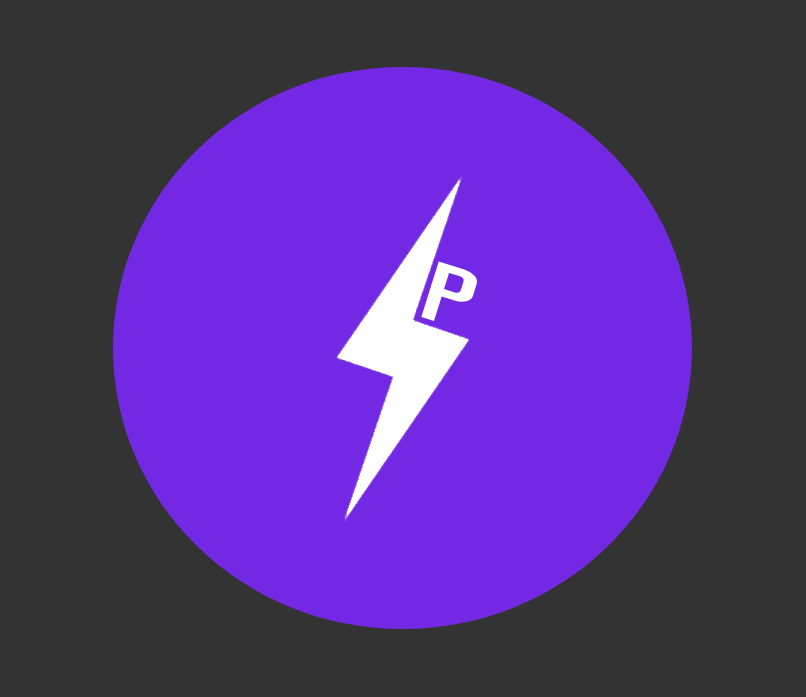
<style>
.page{position:relative;width:806px;height:697px;background:#333333}
.page>*{position:absolute;margin:0}
.t1{font:120.6px "Dhurjati";color:#ffffff}
</style>
<div class="page">
<p class="t1" style="left:421px;top:261px;width:56px;height:60px;rotate:17deg">P</p>
</div>
